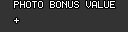
<style>
.page{position:relative;width:128px;height:32px;background:#333333}
.page>*{position:absolute;margin:0}
.t1{font:8px "Terminal";color:#ffffff}
</style>
<div class="page">
<p class="t1" style="left:14px;top:1px;width:101px;height:7px">PHOTO BONUS VALUE</p>
<p class="t1" style="left:14px;top:18px;width:5px;height:5px">+</p>
</div>
